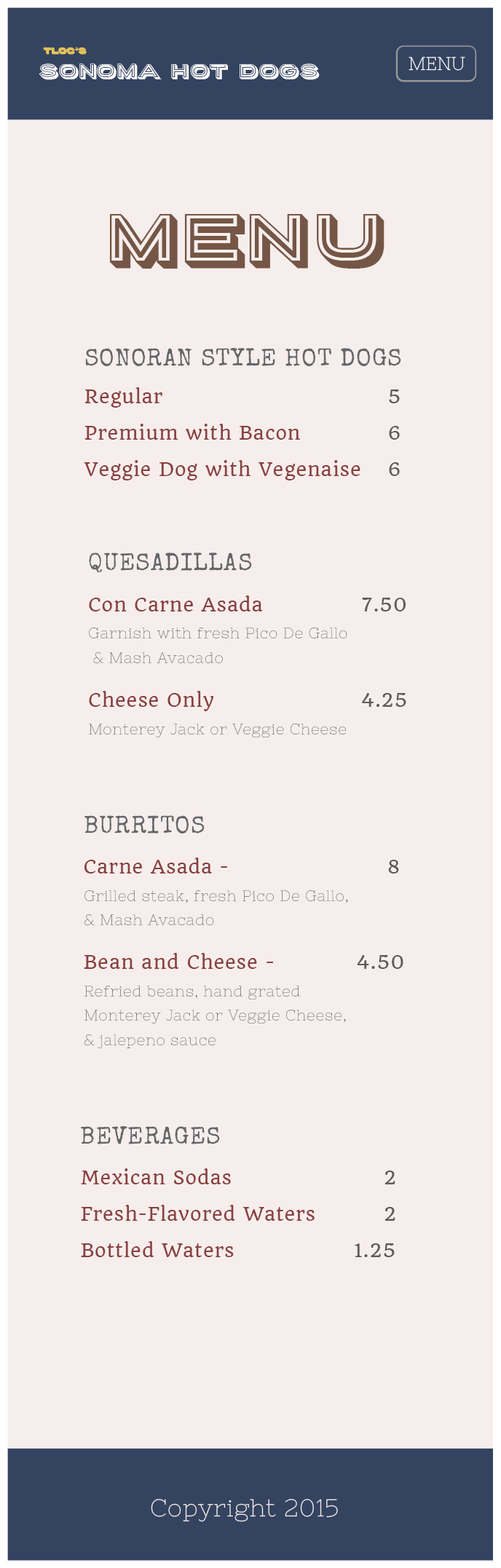
<style>
.page{position:relative;width:501px;height:1568px;background:#f6eeec}
.page>*{position:absolute;margin:0}
.t1{font:7.6px "PorterSansBlock";letter-spacing:-0.023em;color:#e7c559}
.t2{font:7.6px "PorterSansBlock";letter-spacing:-0.154em;color:#e7c559}
.t3{font:7.6px "PorterSansBlock";letter-spacing:-0.073em;color:#e7c559}
.t4{font:7.6px "PorterSansBlock";color:#e7c559}
.t5{font:18.2px "PorterSansBlock";letter-spacing:-0.023em;color:#ffffff}
.t6{font:18.2px "PorterSansBlock";letter-spacing:-0.065em;color:#ffffff}
.t7{font:18.2px "PorterSansBlock";letter-spacing:-0.121em;color:#ffffff}
.t8{font:18.2px "PorterSansBlock";letter-spacing:-0.075em;color:#ffffff}
.t9{font:18.2px "PorterSansBlock";letter-spacing:-0.117em;color:#ffffff}
.t10{font:18.2px "PorterSansBlock";letter-spacing:-0.073em;color:#ffffff}
.t11{font:18.2px "PorterSansBlock";letter-spacing:-0.086em;color:#ffffff}
.t12{font:18.2px "PorterSansBlock";color:#ffffff}
.t13{font:18.2px "NixieOne-Regular";color:#ffffff}
.t14{font:63.7px "PorterSansBlock";letter-spacing:-0.023em;color:#755646}
.t15{font:63.7px "PorterSansBlock";letter-spacing:-0.054em;color:#755646}
.t16{font:63.7px "PorterSansBlock";color:#755646}
.t17{font:24.3px "SpecialElite-Regular";letter-spacing:0.031em;color:#646669}
.t18{font:24.3px "SpecialElite-Regular";letter-spacing:0.03em;color:#646669}
.t19{font:24.3px "SpecialElite-Regular";color:#646669}
.t20{font:18.2px "Quando-Regular";letter-spacing:0.033em;color:#894140}
.t21{font:18.2px "Quando-Regular";letter-spacing:0.032em;color:#894140}
.t22{font:18.2px "Quando-Regular";color:#894140}
.t23{font:18.2px "Quando-Regular";color:#5c5c5c}
.t24{font:18.2px "Quando-Regular";letter-spacing:0.033em;color:#5c5c5c}
.t25{font:18.2px "Quando-Regular";letter-spacing:0.032em;color:#5c5c5c}
.t26{font:24.3px "NixieOne-Regular";letter-spacing:0.031em;color:#f5efed}
.t27{font:24.3px "NixieOne-Regular";letter-spacing:0.019em;color:#f5efed}
.t28{font:24.3px "NixieOne-Regular";letter-spacing:0.025em;color:#f5efed}
.t29{font:24.3px "NixieOne-Regular";letter-spacing:0.014em;color:#f5efed}
.t30{font:24.3px "NixieOne-Regular";letter-spacing:0.017em;color:#f5efed}
.t31{font:24.3px "NixieOne-Regular";color:#f5efed}
</style>
<div class="page">
<p class="t1" style="left:43px;top:47px;width:44px;height:8px">T<span class="t2">l</span><span class="t3">o</span>c’<span class="t4">s</span></p>
<p class="t5" style="left:39px;top:63px;width:281px;height:17px"><span class="t6">S</span>o<span class="t7">n</span>o<span class="t8">m</span>a H<span class="t9">o</span>t <span class="t10">Do</span><span class="t11">g</span><span class="t12">s</span></p>
<p class="t13" style="left:408px;top:57px;width:57px;height:14px">MENU</p>
<p class="t14" style="left:109px;top:214px;width:275px;height:55px">M<span class="t15">e</span>n<span class="t16">u</span></p>
<p class="t17" style="left:85px;top:348px;width:316px;height:18px">SONORAN S<span class="t18">T</span>YLE HO<span class="t18">T</span> DO<span class="t18">G</span><span class="t19">S</span></p>
<p class="t20" style="left:84px;top:387px;width:78px;height:21px">R<span class="t21">e</span>gula<span class="t22">r</span></p>
<p class="t23" style="left:389px;top:389px;width:11px;height:14px">5</p>
<p class="t20" style="left:84px;top:424px;width:216px;height:16px">P<span class="t21">r</span>emium<span class="t21"> w</span>ith Ba<span class="t21">c</span>o<span class="t22">n</span></p>
<p class="t23" style="left:389px;top:426px;width:11px;height:14px">6</p>
<p class="t20" style="left:84px;top:460px;width:276px;height:20px">Veggie Dog <span class="t21">w</span>ith Vege<span class="t21">n</span>aise</p>
<p class="t23" style="left:389px;top:462px;width:11px;height:14px">6</p>
<p class="t17" style="left:89px;top:553px;width:163px;height:20px">Q<span class="t18">U</span>ESA<span class="t18">D</span>I<span class="t18">LL</span>A<span class="t19">S</span></p>
<p class="t20" style="left:89px;top:595px;width:174px;height:16px">Con C<span class="t21">a</span>rne A<span class="t21">sad</span><span class="t22">a</span></p>
<p class="t24" style="left:362px;top:598px;width:43px;height:13px">7.5<span class="t23">0</span></p>
<p class="t20" style="left:89px;top:691px;width:125px;height:20px">Chee<span class="t21">s</span>e Onl<span class="t22">y</span></p>
<p class="t24" style="left:362px;top:693px;width:44px;height:14px">4.2<span class="t23">5</span></p>
<p class="t17" style="left:84px;top:815px;width:121px;height:19px">B<span class="t18">U</span>RRITO<span class="t19">S</span></p>
<p class="t20" style="left:84px;top:858px;width:143px;height:16px">C<span class="t21">a</span>rne A<span class="t21">sada </span><span class="t22">-</span></p>
<p class="t23" style="left:388px;top:860px;width:11px;height:14px">8</p>
<p class="t20" style="left:84px;top:953px;width:189px;height:16px">B<span class="t21">e</span>an and C<span class="t21">hee</span>s<span class="t21">e </span><span class="t22">-</span></p>
<p class="t24" style="left:357px;top:955px;width:46px;height:14px">4.5<span class="t23">0</span></p>
<p class="t17" style="left:81px;top:1126px;width:139px;height:18px">BE<span class="t18">V</span>ERAGE<span class="t19">S</span></p>
<p class="t20" style="left:81px;top:1168px;width:150px;height:16px">Me<span class="t21">x</span>ic<span class="t21">a</span>n So<span class="t21">da</span><span class="t22">s</span></p>
<p class="t23" style="left:384px;top:1171px;width:11px;height:13px">2</p>
<p class="t20" style="left:81px;top:1205px;width:233px;height:16px">Fre<span class="t21">s</span>h-Flavored <span class="t21">W</span>ater<span class="t22">s</span></p>
<p class="t23" style="left:384px;top:1207px;width:11px;height:14px">2</p>
<p class="t20" style="left:81px;top:1241px;width:153px;height:16px">Bottl<span class="t21">e</span>d Wat<span class="t21">e</span>r<span class="t22">s</span></p>
<p class="t24" style="left:355px;top:1243px;width:40px;height:14px">1.<span class="t25">2</span><span class="t23">5</span></p>
<p class="t26" style="left:151px;top:1499px;width:187px;height:23px"><span class="t27">C</span><span class="t28">o</span><span class="t29">p</span>yrig<span class="t30">h</span>t 201<span class="t31">5</span></p>
</div>
